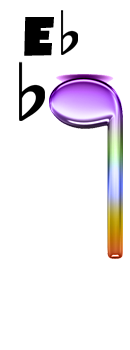
<style>
.page{position:relative;width:130px;height:350px;background:#ffffff}
.page>*{position:absolute;margin:0}
.t1{font:54px "LuckiestGuy-Regular";letter-spacing:0.005em;color:#000000;font-weight:bold;scale:1.11 1}
</style>
<div class="page">
<p class="t1" style="left:24px;top:17px;width:30px;height:39px">E</p>
</div>
